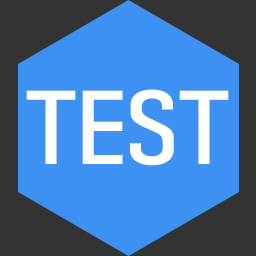
<style>
.page{position:relative;width:256px;height:256px;background:#3d91f2}
.page>*{position:absolute;margin:0}
.t1{font:80px "KoreanYNSJG4-R";color:#ffffff}
</style>
<div class="page">
<p class="t1" style="left:26px;top:89px;width:203px;height:77px">TEST</p>
</div>
